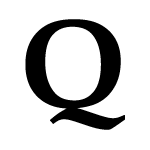
<style>
.page{position:relative;width:150px;height:150px;background:#ffffff}
.page>*{position:absolute;margin:0}
.t1{font:125px "BookAntiqua-Bold";letter-spacing:0.05em;color:#000000;font-weight:bold}
</style>
<div class="page">
<p class="t1" style="left:25px;top:19px;width:100px;height:111px">Q</p>
</div>
